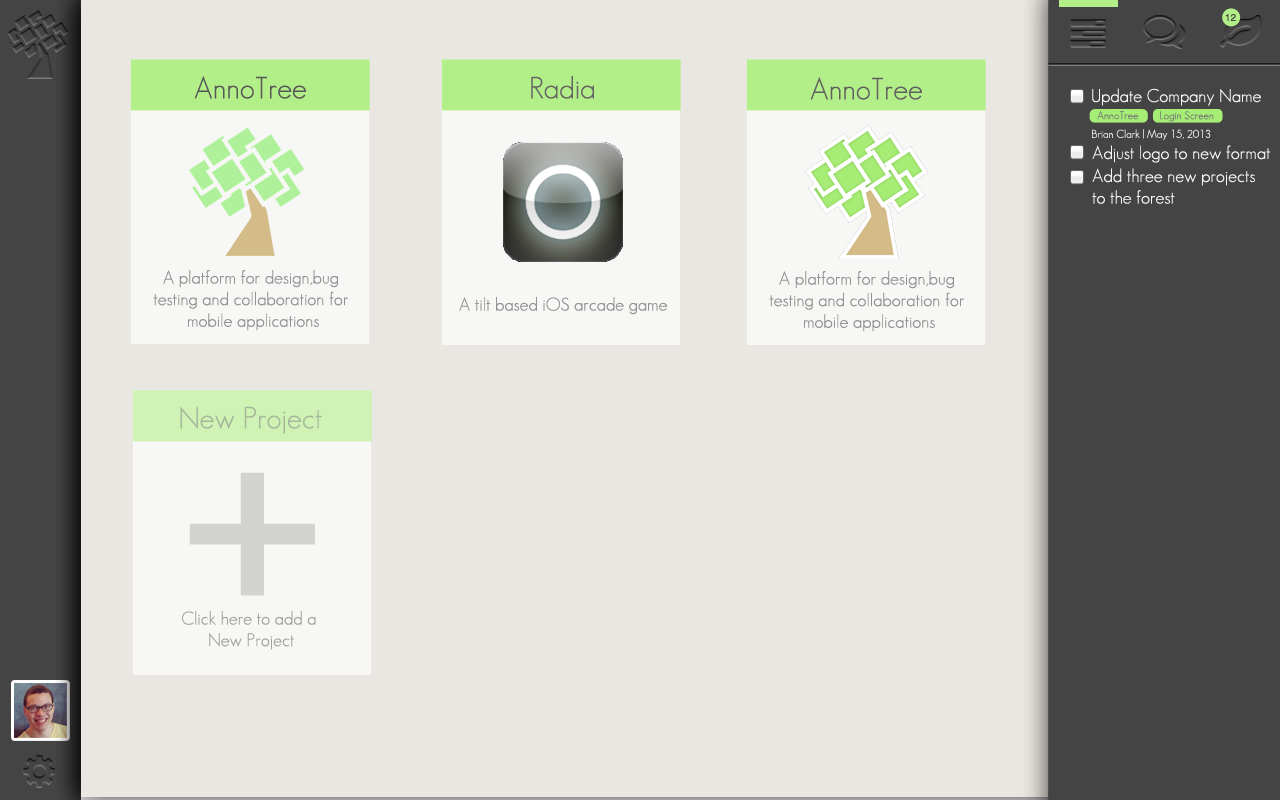
<style>
.page{position:relative;width:1280px;height:800px;background:#eae6e1}
.page>*{position:absolute;margin:0}
.t1{font:10px "Helvetica";color:#444444}
.t2{font:30px "GeosansLight";color:#565656}
.t3{font:30px "GeosansLight";color:#636363}
.t4{font:30px "GeosansLight";color:#5f5f5f}
.t5{font:18px "GeosansLight";color:#f7f8f5}
.t6{font:11px "GeosansLight";color:#747474}
.t7{font:11px "GeosansLight";color:#f7f8f5}
.t8{font:18px "GeosansLight";color:#929292}
.t9{font:30px "GeosansLight";color:#a6b799}
.t10{font:500px "GeosansLight";color:#d3d4d2}
.t11{font:18px "GeosansLight";color:#a2a2a1}
</style>
<div class="page">
<p class="t1" style="left:1225px;top:13px;width:11px;height:8px">12</p>
<p class="t2" style="left:194px;top:76px;width:112px;height:23px">AnnoTree</p>
<p class="t3" style="left:531px;top:76px;width:63px;height:23px">Radia</p>
<p class="t4" style="left:810px;top:77px;width:112px;height:23px">AnnoTree</p>
<p class="t5" style="left:1092px;top:88px;width:169px;height:18px">Update Company Name</p>
<p class="t6" style="left:1097px;top:111px;width:42px;height:9px">AnnoTree</p>
<p class="t6" style="left:1160px;top:111px;width:54px;height:11px">Login Screen</p>
<p class="t7" style="left:1092px;top:129px;width:119px;height:11px">Brian Clark | May 15, 2013</p>
<p class="t5" style="left:1092px;top:145px;width:179px;height:18px">Adjust logo to new format</p>
<p class="t5" style="left:1092px;top:168px;width:163px;height:36px">Add three new projects <br>to the forest</p>
<p class="t8" style="left:153px;top:270px;width:195px;height:61px;text-align:center">A platform for design,bug <br>testing and collaboration for <br>mobile applications</p>
<p class="t8" style="left:769px;top:271px;width:195px;height:61px;text-align:center">A platform for design,bug <br>testing and collaboration for <br>mobile applications</p>
<p class="t8" style="left:459px;top:297px;width:208px;height:18px">A tilt based iOS arcade game</p>
<p class="t9" style="left:180px;top:406px;width:142px;height:28px">New Project</p>
<p class="t10" style="left:189px;top:472px;width:126px;height:124px">+</p>
<p class="t11" style="left:182px;top:611px;width:134px;height:39px;text-align:center">Click here to add a <br>New Project</p>
</div>
